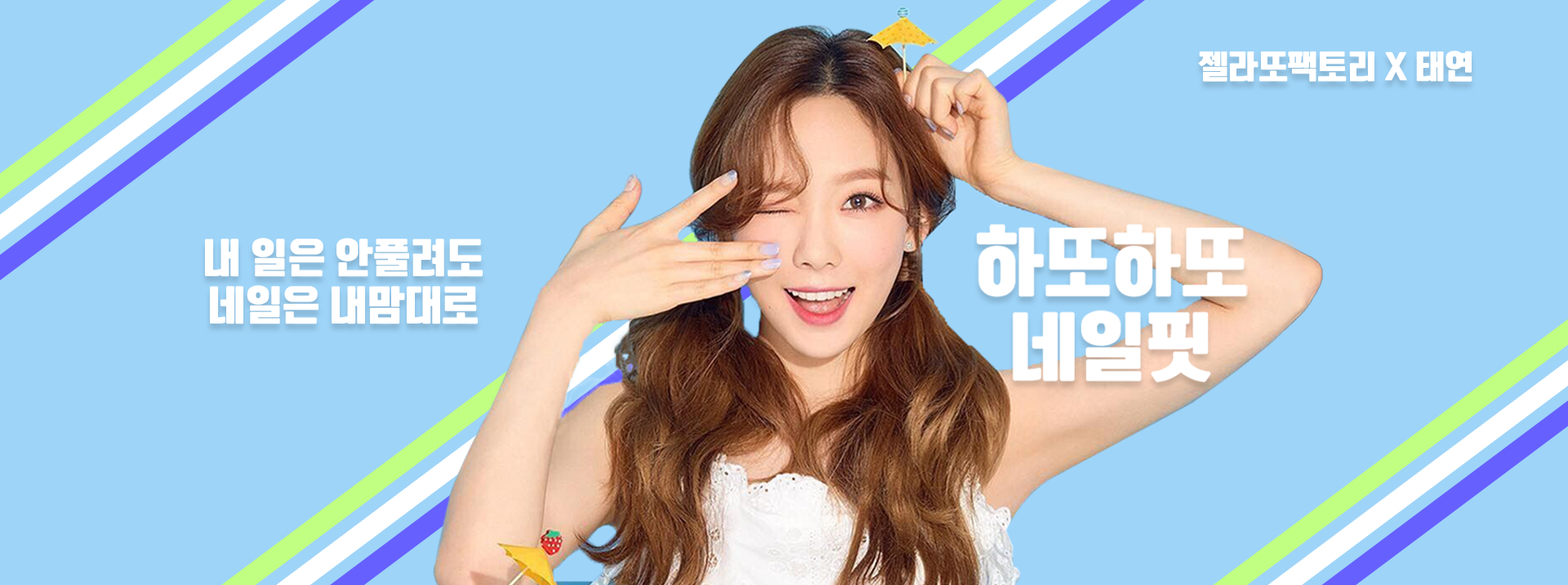
<style>
.page{position:relative;width:1568px;height:585px;background:#9ed4f8}
.page>*{position:absolute;margin:0}
.t1{font:32.7px "RixSejongroGulimBlack";letter-spacing:0.001em;color:#ffffff}
.t2{font:75.2px/84.6px "RixSejongroGulimBlack";letter-spacing:0.001em;color:#ffffff}
.t3{font:40.8px/47.4px "RixSejongroGulimBlack";letter-spacing:0.001em;color:#ffffff}
</style>
<div class="page">
<p class="t1" style="left:1198px;top:51px;width:274px;height:31px">젤라또팩토리 X 태연</p>
<p class="t2" style="left:977px;top:224px;width:271px;height:159px;text-align:center">하또하또<br>네일핏</p>
<p class="t3" style="left:205px;top:238px;width:278px;height:86px;text-align:center">내 일은 안풀려도<br>네일은 내맘대로</p>
</div>
